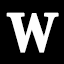
<style>
.page{position:relative;width:64px;height:64px;background:#000000}
.page>*{position:absolute;margin:0}
.t1{font:58.3px "MinionPro-BoldCn";color:#fefefe;font-weight:bold}
</style>
<div class="page">
<p class="t1" style="left:6px;top:12px;width:53px;height:41px">W</p>
</div>
